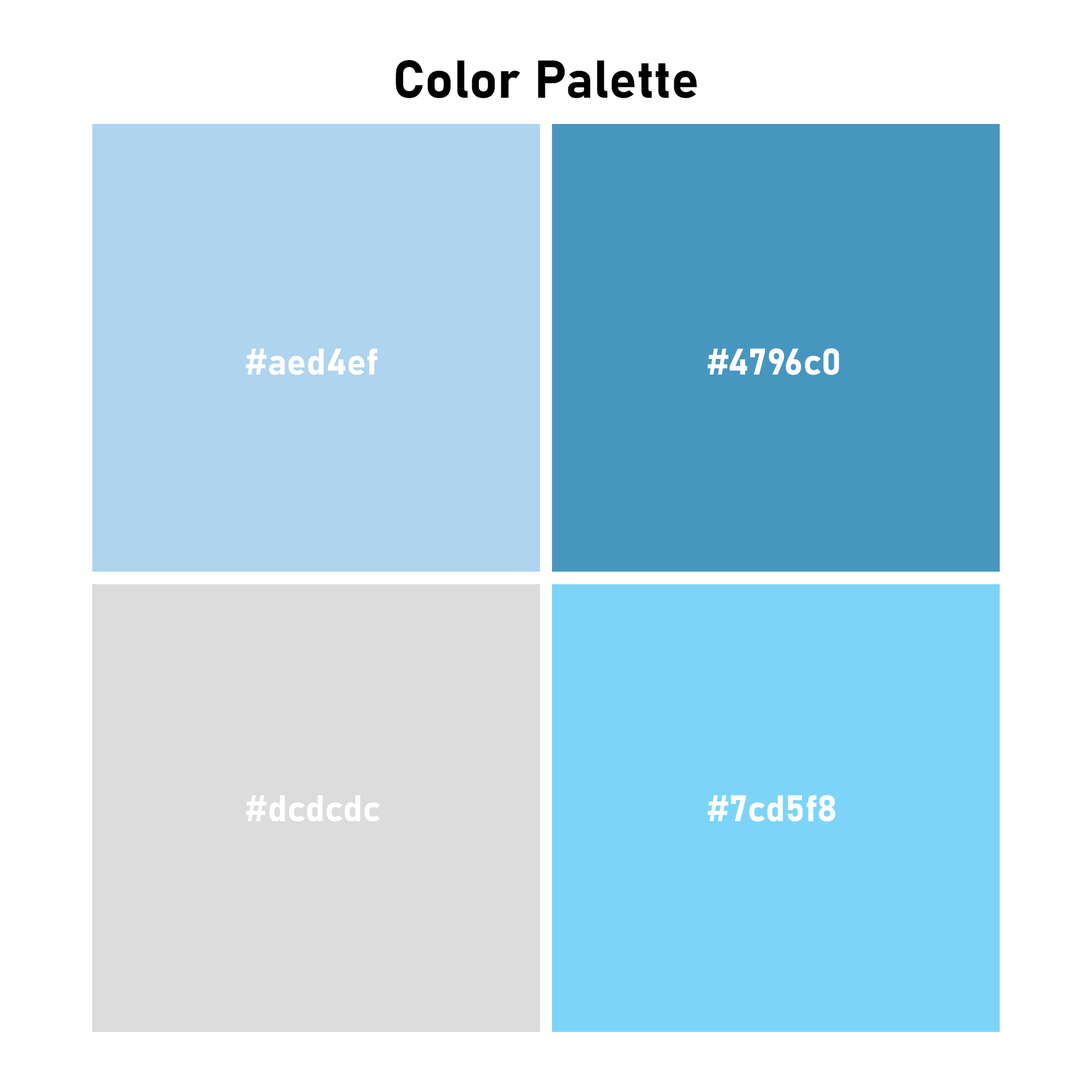
<style>
.page{position:relative;width:1092px;height:1092px;background:#ffffff}
.page>*{position:absolute;margin:0}
.t1{font:52.6px "Bahnschrift-Bold";color:#000000}
.t2{font:36.4px "Bahnschrift-Bold";color:#ffffff}
</style>
<div class="page">
<p class="t1" style="left:396px;top:60px;width:301px;height:38px">Color Palette</p>
<p class="t2" style="left:246px;top:348px;width:132px;height:27px">#aed4ef</p>
<p class="t2" style="left:708px;top:348px;width:131px;height:27px">#4796c0</p>
<p class="t2" style="left:246px;top:795px;width:134px;height:27px">#dcdcdc</p>
<p class="t2" style="left:708px;top:795px;width:127px;height:27px">#7cd5f8</p>
</div>
